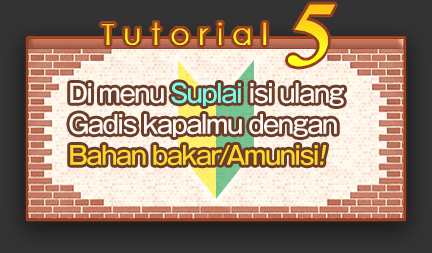
<style>
.page{position:relative;width:432px;height:253px}
.page>*{position:absolute;margin:0}
.t1{font:25px/40px "GothicMB101Pro-Medium";letter-spacing:-0.06em;color:#fff8f3;scale:0.95 1}
.t2{font:25px/40px "GothicMB101Pro-Medium";letter-spacing:-0.06em;color:#7afbe7;scale:0.95 1}
.t3{font:25px/40px "GothicMB101Pro-Medium";letter-spacing:-0.06em;color:#ffd929;scale:0.95 1}
.t4{font:25px/40px "GothicMB101Pro-Medium";letter-spacing:-0.06em;color:#ffd929;font-style:italic;scale:0.95 1}
</style>
<div class="page">
<p class="t1" style="left:69px;top:82px;width:276px;height:84px">Di menu <span class="t2">Suplai </span>isi ulang<br>Gadis kapalmu dengan<br><span class="t3">Bahan bakar/Amunisi</span><span class="t4">!</span></p>
</div>
